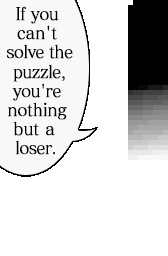
<style>
.page{position:relative;width:168px;height:256px;background:#ffffff}
.page>*{position:absolute;margin:0}
.t1{font:17.6px "MatissePro-M";letter-spacing:-0.05em;color:#000000;font-weight:bold;scale:0.91 1}
.t2{font:17.6px "MatissePro-M";letter-spacing:-0.01em;color:#000000;font-weight:bold;scale:0.91 1}
.t3{font:17.6px "MatissePro-M";letter-spacing:-0.025em;color:#000000;font-weight:bold;scale:0.91 1}
</style>
<div class="page">
<p class="t1" style="left:7px;top:6px;width:66px;height:149px;text-align:center">If you<br><span class="t2">can't<br></span> solve the<br> puzzle,<br>you're<br><span class="t3">nothing<br></span><span class="t2">but a <br> </span>loser.</p>
</div>
